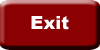
<style>
.page{position:relative;width:100px;height:50px;background:#8b0000}
.page>*{position:absolute;margin:0}
.t1{font:18px "Arial-Black";color:#fffeff}
</style>
<div class="page">
<p class="t1" style="left:31px;top:16px;width:38px;height:14px">Exit</p>
</div>
